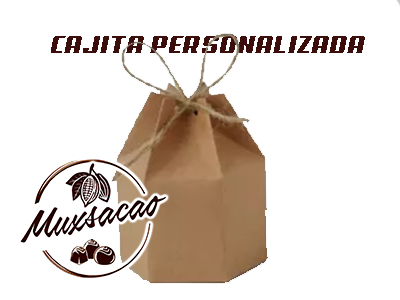
<style>
.page{position:relative;width:400px;height:300px;background:#ffffff}
.page>*{position:absolute;margin:0}
.t1{font:24px "Aero";letter-spacing:0.05em;color:#3b0d0b}
</style>
<div class="page">
<p class="t1" style="left:51px;top:36px;width:314px;height:17px">CAJITA PERSONALIZADA</p>
</div>
